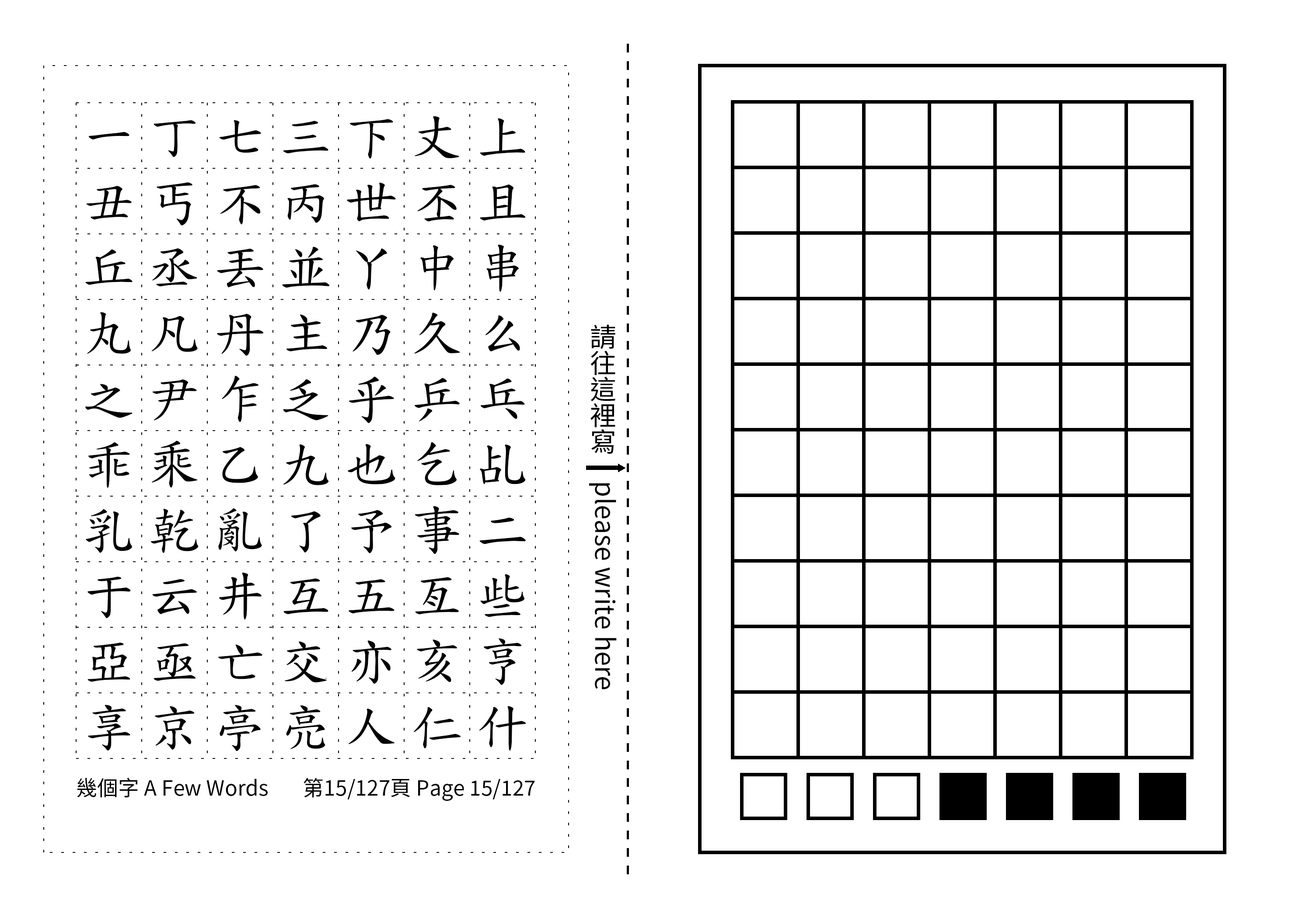
<style>
.page{position:relative;width:1299px;height:918px;background:#ffffff}
.page>*{position:absolute;margin:0}
.t1{font:52.5px/65.6px "TW-Kai-98_1";letter-spacing:0.25em;color:#000000}
.t2{font:26.2px "SourceHanSansTC-Regular";color:#000000}
.t3{font:21px "SourceHanSansTC-Regular";color:#000000}
</style>
<div class="page">
<p class="t1" style="left:85px;top:116px;width:441px;height:636px;text-align:center">一丁七三下丈上丑丐不丙世丕且丘丞丟並丫中串丸凡丹主乃久么之尹乍乏乎乒乓乖乘乙九也乞乩乳乾亂了予事二于云井互五亙些亞亟亡交亦亥亨享京亭亮人仁什</p>
<p class="t2" style="left:589px;top:324px;width:28px;height:366px;text-align:center">請往這裡寫　please write here</p>
<p class="t3" style="left:77px;top:778px;width:191px;height:20px">幾個字 A Few Words</p>
<p class="t3" style="left:303px;top:778px;width:232px;height:23px">第15/127頁 Page 15/127</p>
</div>
